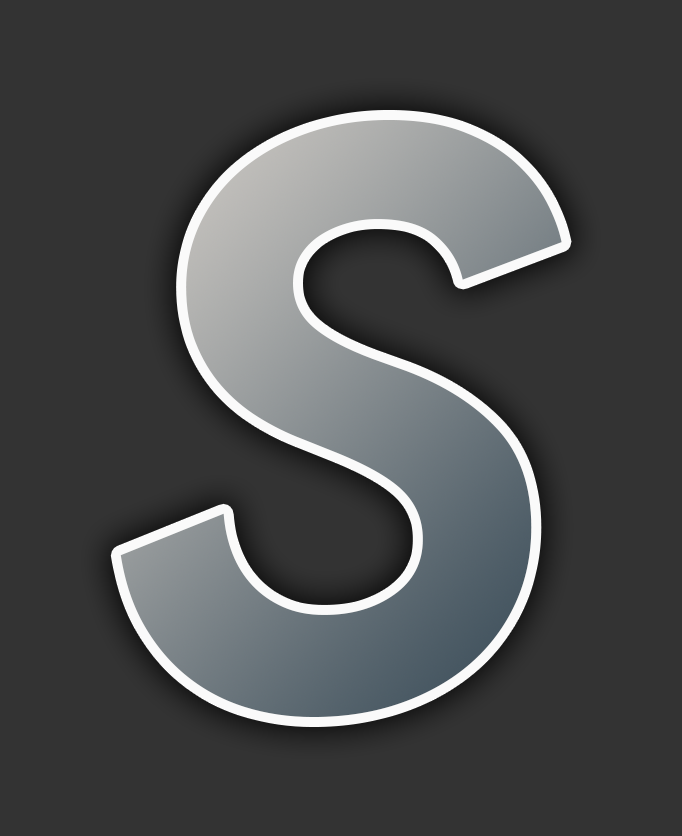
<style>
.page{position:relative;width:682px;height:836px;background:#333333}
.page>*{position:absolute;margin:0}
.t1{font:797px "ProductSans-BoldItalic";letter-spacing:-0.22em}
</style>
<div class="page">
<p class="t1" style="left:120px;top:120px;width:442px;height:597px">S</p>
</div>
